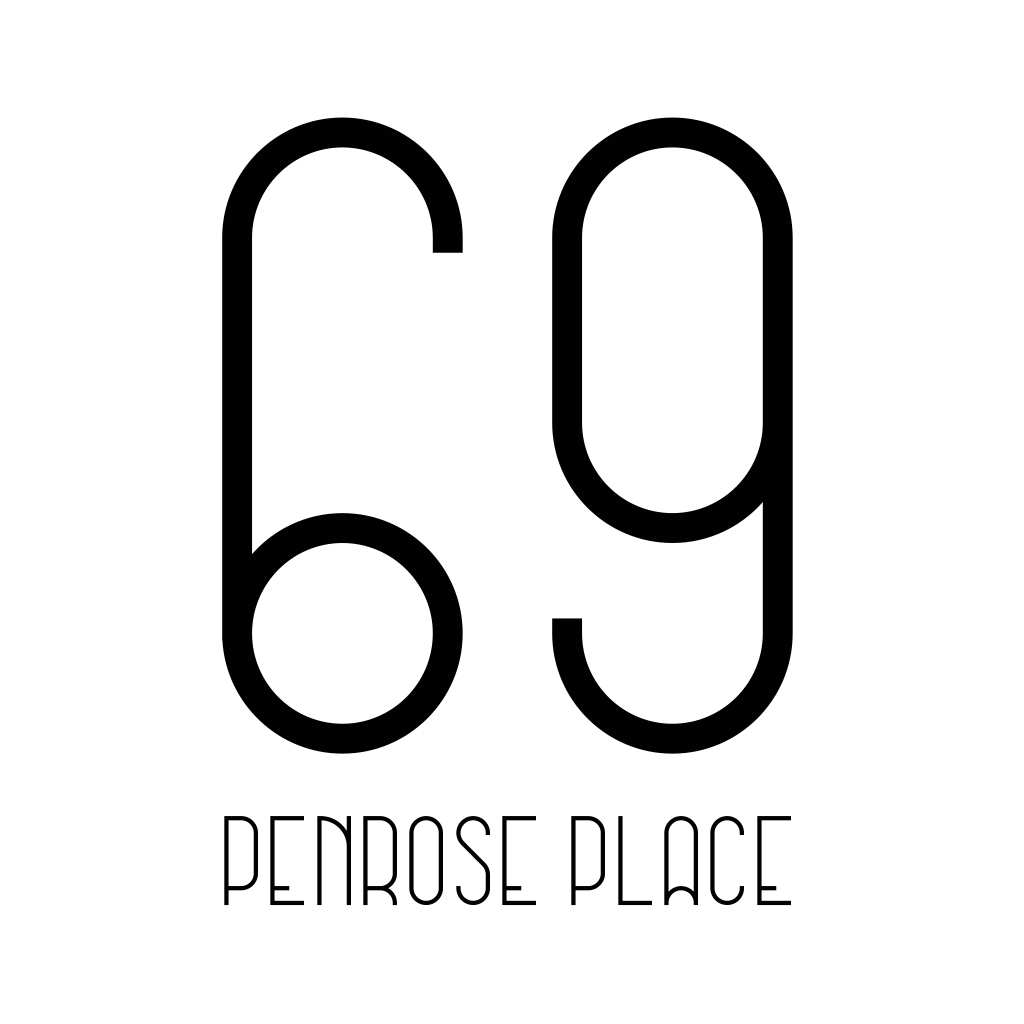
<style>
.page{position:relative;width:1024px;height:1024px;background:#ffffff}
.page>*{position:absolute;margin:0}
.t1{font:127px "MusaRegular";color:#010101}
.t2{font:904px "MusaRegular";color:#010101}
</style>
<div class="page">
<p class="t1" style="left:222px;top:117px;width:571px;height:789px;text-align:center"><span class="t2">69<br></span>Penrose Place</p>
</div>
